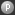
<style>
.page{position:relative;width:15px;height:15px;background:#333333}
.page>*{position:absolute;margin:0}
.t1{font:10px "AndaleMono";color:#ffffff}
</style>
<div class="page">
<p class="t1" style="left:6px;top:4px;width:4px;height:7px">p</p>
</div>
